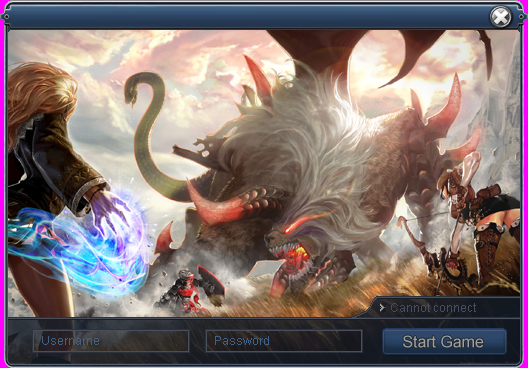
<style>
.page{position:relative;width:528px;height:368px}
.page>*{position:absolute;margin:0}
.t1{font:12px "ArialMT";color:#484e5b}
.t2{font:12px "ArialMT";color:#426285}
.t3{font:15.9px "ArialMT";color:#a0a0a0}
</style>
<div class="page">
<p class="t1" style="left:391px;top:303px;width:85px;height:9px">Cannot connect</p>
<p class="t2" style="left:42px;top:336px;width:57px;height:9px">Username</p>
<p class="t2" style="left:215px;top:336px;width:54px;height:9px">Password</p>
<p class="t3" style="left:403px;top:335px;width:81px;height:13px">Start Game</p>
</div>
